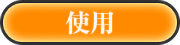
<style>
.page{position:relative;width:180px;height:45px;background:#ff8a00}
.page>*{position:absolute;margin:0}
.t1{font:25px "RyuminPr6N-ExBold";color:#fff6f3}
</style>
<div class="page">
<p class="t1" style="left:65px;top:11px;width:48px;height:24px">使用</p>
</div>
